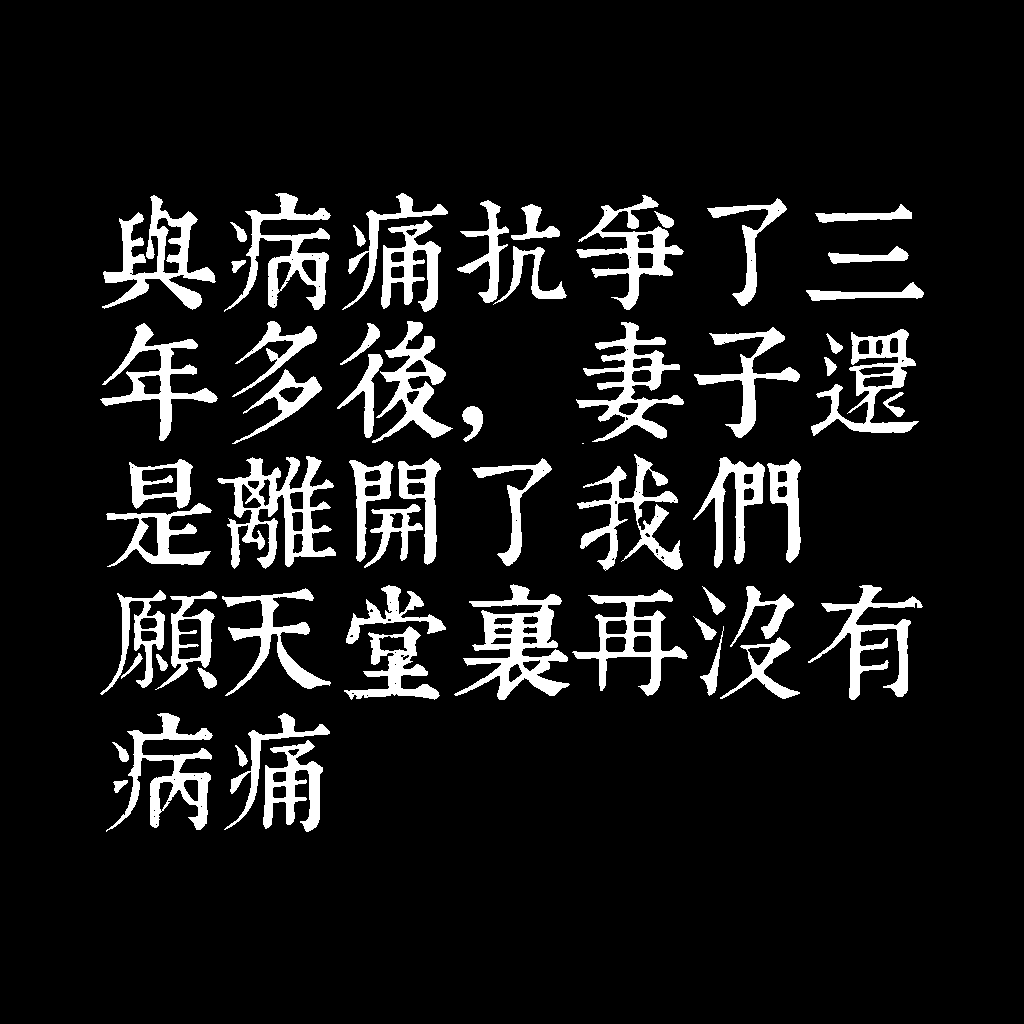
<style>
.page{position:relative;width:1024px;height:1024px;background:#000000}
.page>*{position:absolute;margin:0}
.t1{font:120px/130px "TpldKhangXiDictTrial";letter-spacing:-0.02em;color:#ffffff}
</style>
<div class="page">
<p class="t1" style="left:100px;top:193px;width:824px;height:639px">與病痛抗爭了三<br>年多後，妻子還<br>是離開了我們<br>願天堂裡再沒有<br>病痛</p>
</div>
